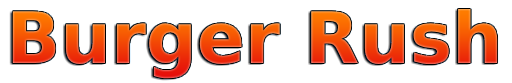
<style>
.page{position:relative;width:512px;height:83px;background:#ffffff}
.page>*{position:absolute;margin:0}
.t1{font:71px "BerlinSansFBDemi-Bold"}
</style>
<div class="page">
<p class="t1" style="left:12px;top:9px;width:486px;height:70px">Burger Rush</p>
</div>
